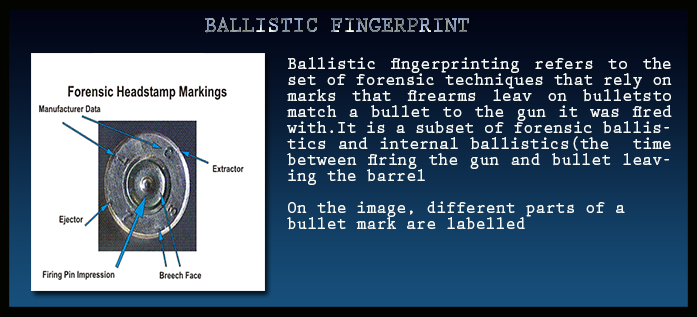
<style>
.page{position:relative;width:697px;height:317px}
.page>*{position:absolute;margin:0}
.t1{font:22.4px "PrestigeEliteStd-Bd";letter-spacing:0.002em;scale:0.94 1}
.t2{font:17.6px/16px "PrestigeEliteStd-Bd";letter-spacing:0.002em;color:#f4f8f6;scale:0.94 1}
</style>
<div class="page">
<p class="t1" style="left:205px;top:17px;width:264px;height:16px">BALLISTIC FINGERPRINT</p>
<p class="t2" style="left:287px;top:57px;width:385px;height:173px;text-align:justify">Ballistic fingerprinting refers to the set of forensic techniques that rely on marks that firearms leav on bulletsto match a bullet to the gun it was fired with.It is a subset of forensic ballistics and internal ballistics(the  time between firing the gun and bullet leaving the barrel<br><br>On the image, different parts of a <br>bullet mark are labelled</p>
</div>
